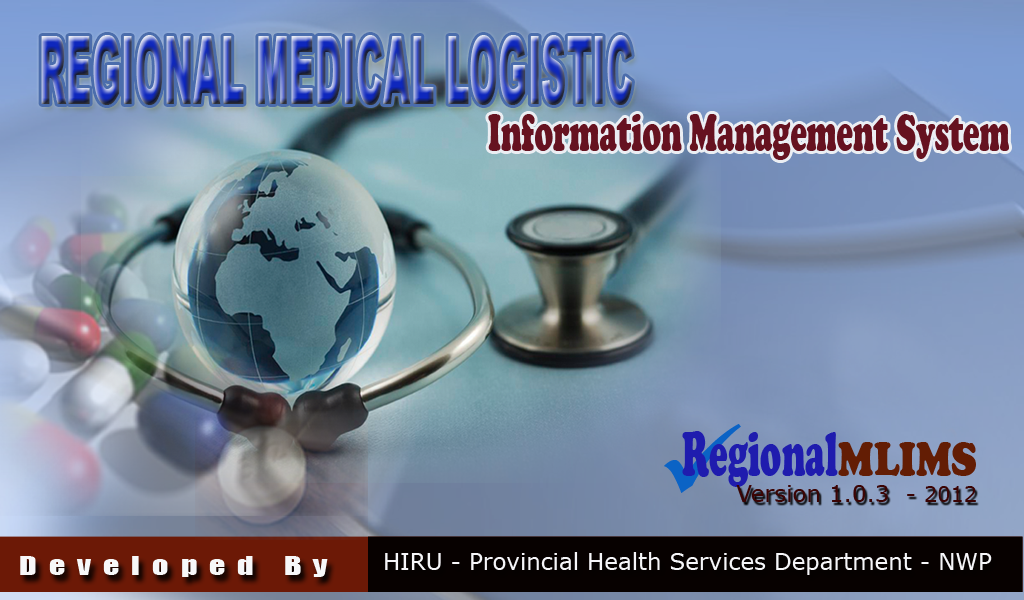
<style>
.page{position:relative;width:1024px;height:600px}
.page>*{position:absolute;margin:0}
.t1{font:52.8px "CooperBlack";color:#661220;scale:0.59 1}
.t2{font:64.5px "CooperBlack";color:#1f1cae;scale:0.55 1}
.t3{font:48.4px "CooperBlack";color:#631d04;scale:0.83 1}
.t4{font:22.9px "Verdana";color:#3b0404}
.t5{font:20.8px "Verdana";color:#3b0404}
.t6{font:24.2px "Impact";letter-spacing:0.375em;color:#f7f8f9;scale:1.32 1}
.t7{font:22.9px "Verdana";color:#f6f6f9}
</style>
<div class="page">
<p class="t1" style="left:488px;top:114px;width:521px;height:46px">Information Management System</p>
<p class="t2" style="left:682px;top:431px;width:156px;height:56px">Regional</p>
<p class="t3" style="left:838px;top:442px;width:138px;height:34px">MLIMS</p>
<p class="t4" style="left:736px;top:485px;width:240px;height:17px">Version 1.0.3  - <span class="t5">2012</span></p>
<p class="t6" style="left:20px;top:556px;width:308px;height:21px">Developed By</p>
<p class="t7" style="left:385px;top:552px;width:607px;height:23px">HIRU - Provincial Health Services Department - NWP</p>
</div>
